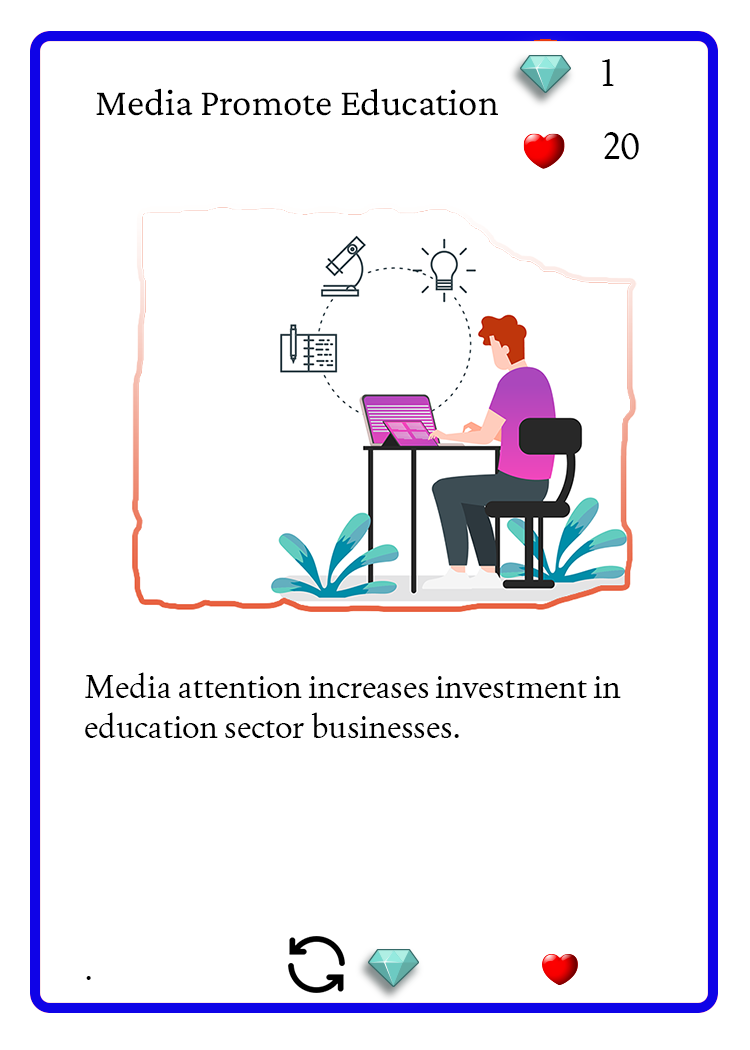
<style>
.page{position:relative;width:750px;height:1050px;background:#ffffff}
.page>*{position:absolute;margin:0}
.t1{font:37.5px "Joan-Regular";color:#000000;text-transform:uppercase}
.t2{font:38.9px "CrimsonPro-Regular";color:#000000}
.t3{font:33.3px "Joan-Regular";color:#000000}
</style>
<div class="page">
<p class="t1" style="left:602px;top:59px;width:12px;height:27px">1</p>
<p class="t2" style="left:96px;top:88px;width:402px;height:28px">Media Promote Education</p>
<p class="t1" style="left:604px;top:132px;width:35px;height:28px">20</p>
<p class="t3" style="left:85px;top:672px;width:536px;height:66px">Media attention increases investment in education sector businesses.</p>
<p class="t3" style="left:86px;top:976px;width:5px;height:4px">.</p>
</div>
